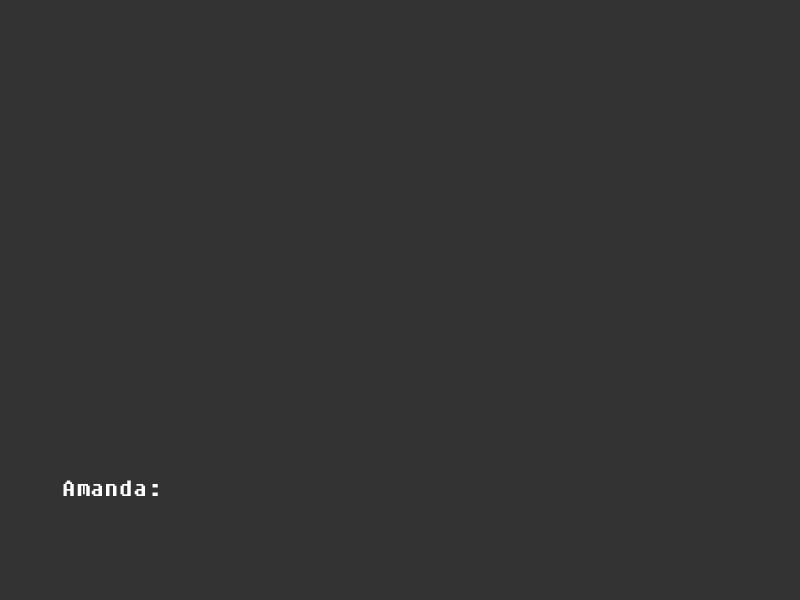
<style>
.page{position:relative;width:800px;height:600px;background:#333333}
.page>*{position:absolute;margin:0}
.t1{font:22px "Fixedsys";letter-spacing:0.025em;color:#ffffff}
</style>
<div class="page">
<p class="t1" style="left:63px;top:480px;width:95px;height:16px">Amanda:</p>
</div>
